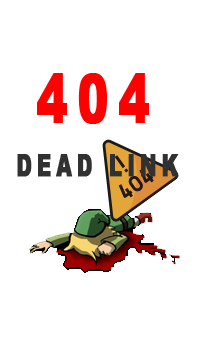
<style>
.page{position:relative;width:200px;height:350px;background:#ffffff}
.page>*{position:absolute;margin:0}
.t1{font:66.9px "Arial-Black";letter-spacing:0.2em;color:#ff0000;text-transform:uppercase;font-weight:bold;scale:0.69 1}
.t2{font:29.8px "Arial-Black";letter-spacing:0.2em;color:#313131;text-transform:uppercase;font-weight:bold;scale:0.69 1}
</style>
<div class="page">
<p class="t1" style="left:37px;top:73px;width:112px;height:51px">404</p>
<p class="t2" style="left:17px;top:154px;width:162px;height:23px">dead link</p>
</div>
